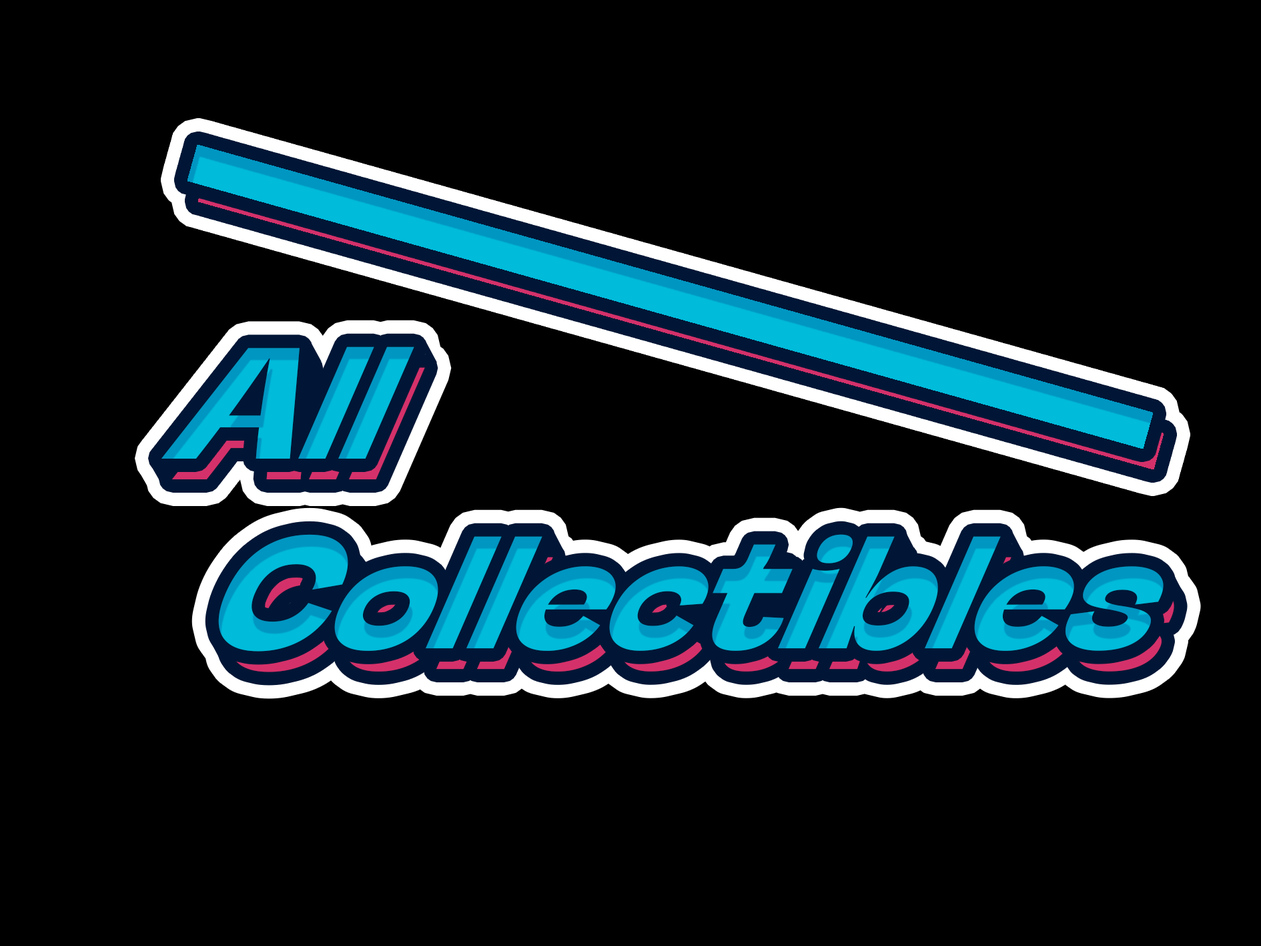
<style>
.page{position:relative;width:1261px;height:946px;background:#000000}
.page>*{position:absolute;margin:0}
.t1{font:172.4px "StingerFitTrial-Bold";color:#00bbda;scale:0.97 1}
</style>
<div class="page">
<p class="t1" style="left:161px;top:346px;width:1003px;height:305px">All <br>     Collectibles</p>
</div>
